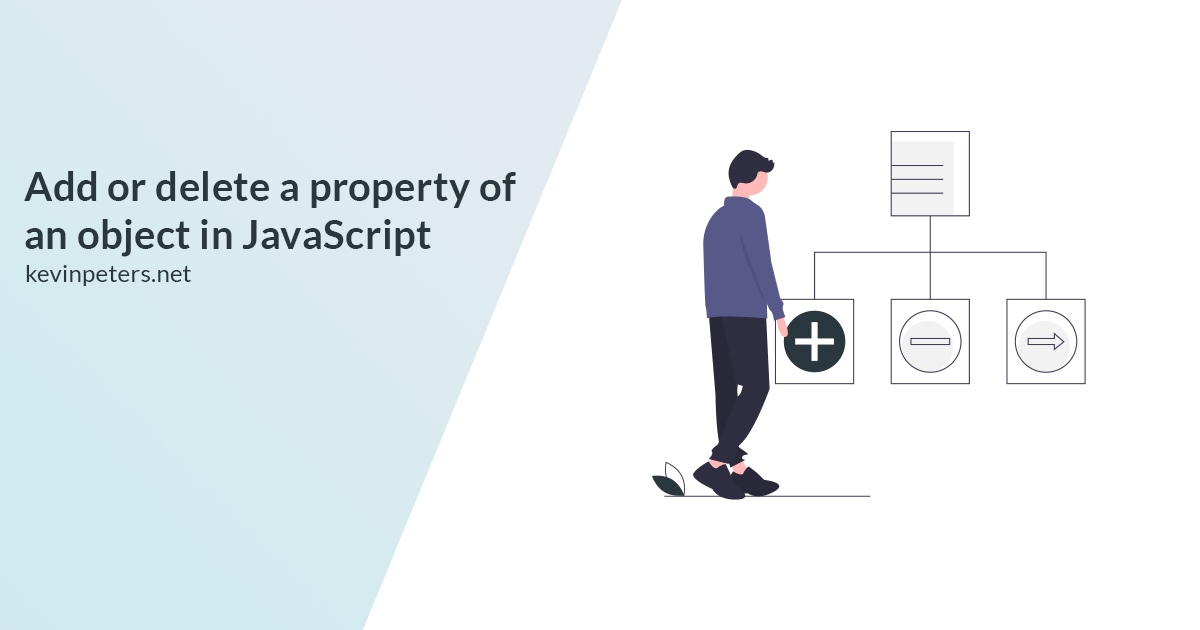
<style>
.page{position:relative;width:1200px;height:630px;background:#ffffff}
.page>*{position:absolute;margin:0}
.t1{font:40px "Lato-Bold";letter-spacing:0.01em;color:#2b373e}
.t2{font:24px "Lato-Regular";letter-spacing:0.01em;color:#2b373e}
</style>
<div class="page">
<p class="t1" style="left:24px;top:171px;width:492px;height:86px">Add or delete a property of <br>an object in JavaScript</p>
<p class="t2" style="left:26px;top:265px;width:165px;height:21px">kevinpeters.net</p>
</div>
